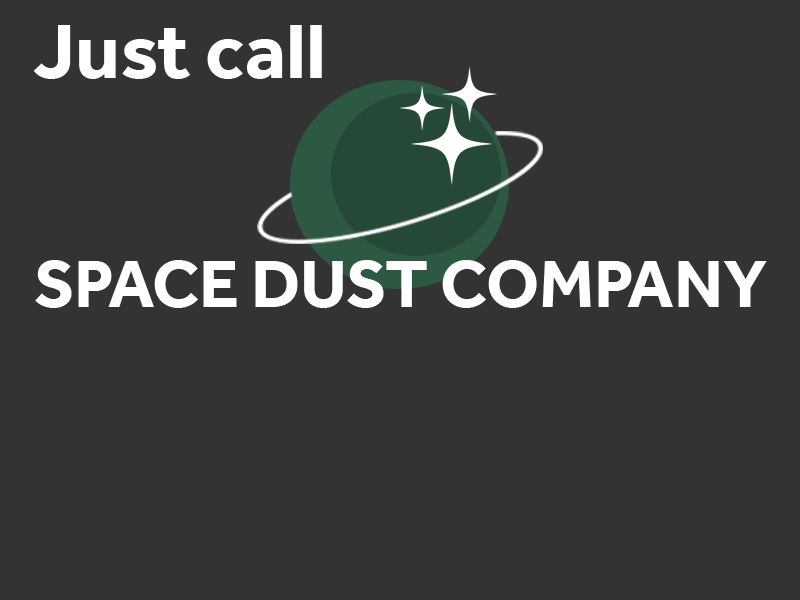
<style>
.page{position:relative;width:800px;height:600px;background:#333333}
.page>*{position:absolute;margin:0}
.t1{font:80.2px "Effra-Bold";color:#ffffff}
.t2{font:68.6px "Effra-Bold";color:#ffffff}
</style>
<div class="page">
<p class="t1" style="left:33px;top:25px;width:289px;height:54px">Just call</p>
<p class="t2" style="left:35px;top:260px;width:732px;height:48px">SPACE DUST COMPANY</p>
</div>
